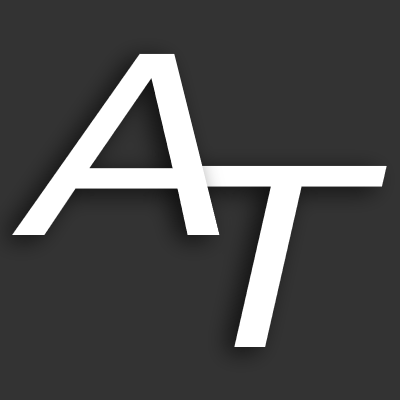
<style>
.page{position:relative;width:400px;height:400px;background:#333333}
.page>*{position:absolute;margin:0}
.t1{font:248.4px "BankGothicBT-Medium";letter-spacing:-0.05em;color:#ffffff;font-style:italic;scale:1.25 1}
</style>
<div class="page">
<p class="t1" style="left:12px;top:53px;width:208px;height:182px">A</p>
<p class="t1" style="left:190px;top:165px;width:197px;height:182px">T</p>
</div>
